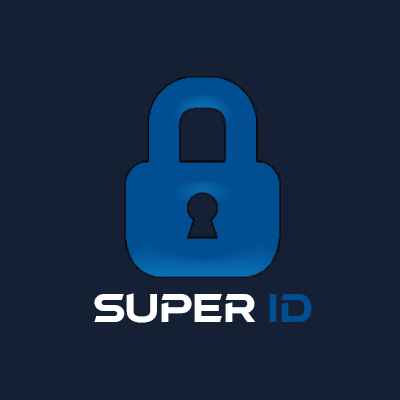
<style>
.page{position:relative;width:400px;height:400px;background:#152034}
.page>*{position:absolute;margin:0}
.t1{font:36px "aAtmospheric";color:#ffffff}
.t2{font:36px "aAtmospheric";color:#014e92}
</style>
<div class="page">
<p class="t1" style="left:94px;top:293px;width:218px;height:30px">Super <span class="t2">ID</span></p>
</div>
